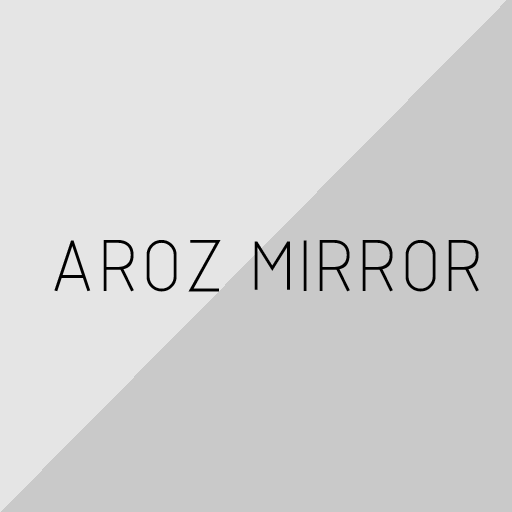
<style>
.page{position:relative;width:512px;height:512px;background:#c9c9c9}
.page>*{position:absolute;margin:0}
.t1{font:75px "ISOCP_IV25";color:#000000}
</style>
<div class="page">
<p class="t1" style="left:54px;top:240px;width:425px;height:52px">AROZ MIRROR</p>
</div>
